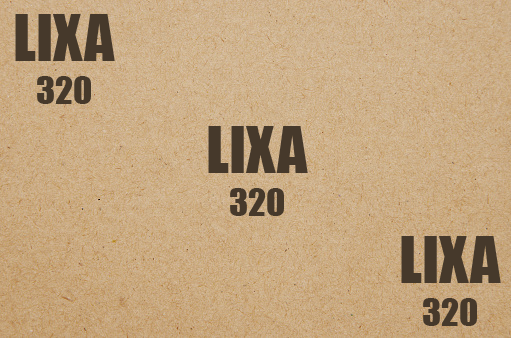
<style>
.page{position:relative;width:511px;height:338px}
.page>*{position:absolute;margin:0}
.t1{font:60px "Impact";color:#46392b}
.t2{font:36px "Impact";color:#46392b}
</style>
<div class="page">
<p class="t1" style="left:15px;top:14px;width:100px;height:90px;text-align:center">LIXA<br><span class="t2">320</span></p>
<p class="t1" style="left:208px;top:126px;width:100px;height:90px;text-align:center">LIXA<br><span class="t2">320</span></p>
<p class="t1" style="left:401px;top:236px;width:100px;height:90px;text-align:center">LIXA<br><span class="t2">320</span></p>
</div>
